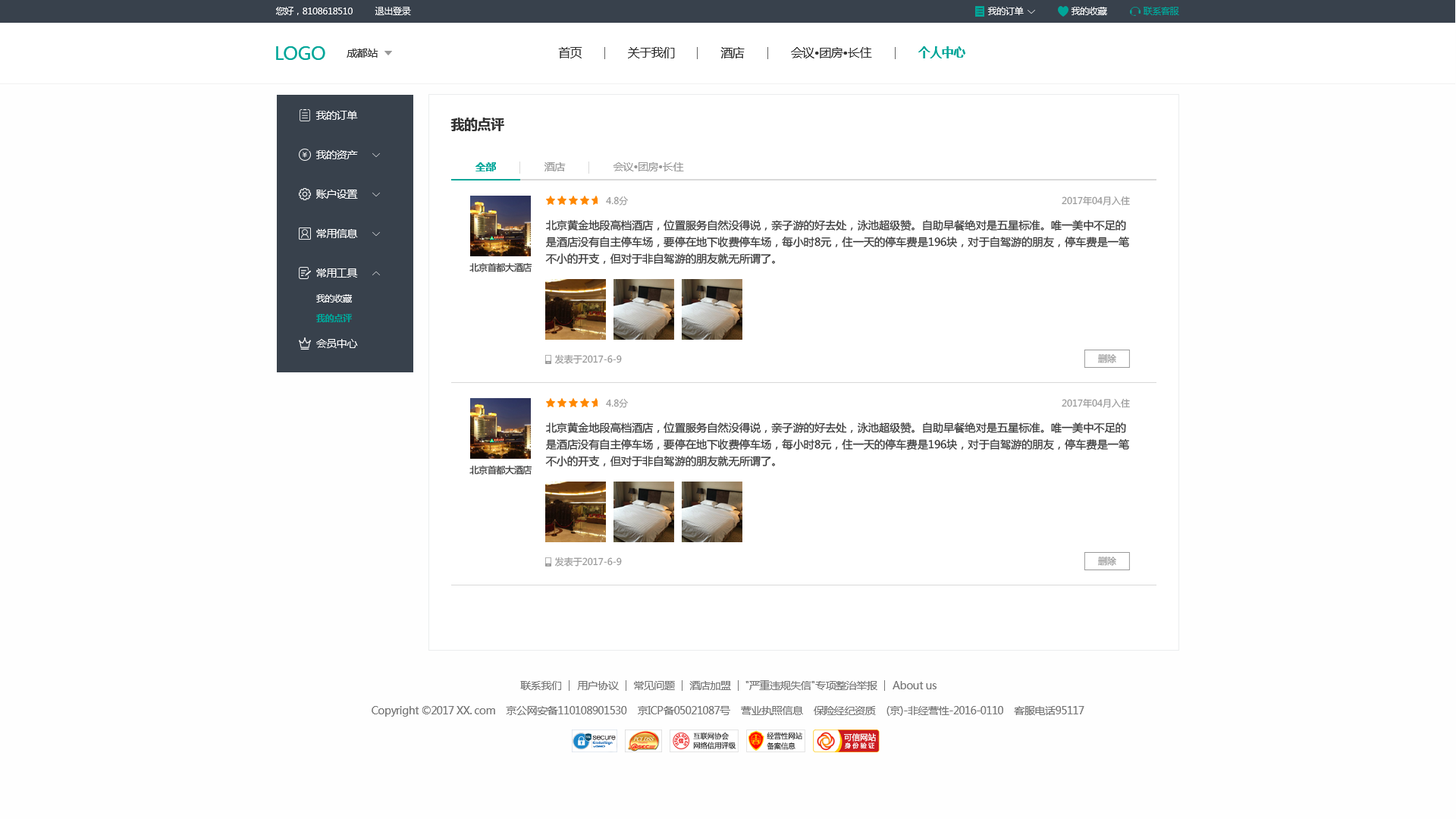
<style>
.page{position:relative;width:1456px;height:819px;background:#fefefe}
.page>*{position:absolute;margin:0}
.t1{font:9.1px "MicrosoftYaHei";letter-spacing:-0.03em;color:#ffffff}
.t2{font:9.1px "MicrosoftYaHei";letter-spacing:-0.03em;color:#00a699}
.t3{font:18.2px "MicrosoftYaHei";letter-spacing:-0.03em;color:#00a699}
.t4{font:10.6px "MicrosoftYaHei";letter-spacing:-0.03em;color:#333333}
.t5{font:12.1px "MicrosoftYaHei";letter-spacing:-0.03em;color:#333333}
.t6{font:12.1px "MicrosoftYaHei-Bold";letter-spacing:-0.03em;color:#00a699}
.t7{font:10.6px "MicrosoftYaHei";letter-spacing:-0.03em;color:#ffffff}
.t8{font:13.6px "MicrosoftYaHei-Bold";letter-spacing:-0.03em;color:#333333}
.t9{font:10.6px "MicrosoftYaHei-Bold";letter-spacing:-0.03em;color:#00a699}
.t10{font:10.6px "MicrosoftYaHei";letter-spacing:-0.03em;color:#999999}
.t11{font:9.1px "MicrosoftYaHei";color:#999999}
.t12{font:10.6px/16.7px "MicrosoftYaHei";color:#333333}
.t13{font:9.1px "MicrosoftYaHei";letter-spacing:-0.03em;color:#333333}
.t14{font:9.1px "MicrosoftYaHei-Bold";letter-spacing:-0.03em;color:#00a699}
.t15{font:10.6px "MicrosoftYaHei";letter-spacing:-0.03em;color:#777777}
</style>
<div class="page">
<p class="t1" style="left:276px;top:7px;width:77px;height:8px">您好，8108618510</p>
<p class="t1" style="left:375px;top:7px;width:36px;height:8px">退出登录</p>
<p class="t1" style="left:987px;top:7px;width:37px;height:8px">我的订单</p>
<p class="t1" style="left:1071px;top:7px;width:36px;height:8px">我的收藏</p>
<p class="t2" style="left:1144px;top:7px;width:35px;height:8px">联系客服</p>
<p class="t3" style="left:276px;top:46px;width:49px;height:14px">LOGO</p>
<p class="t4" style="left:347px;top:49px;width:31px;height:9px">成都站</p>
<p class="t5" style="left:558px;top:47px;width:24px;height:11px">首页</p>
<p class="t5" style="left:628px;top:47px;width:47px;height:11px">关于我们</p>
<p class="t5" style="left:720px;top:47px;width:25px;height:11px">酒店</p>
<p class="t5" style="left:791px;top:47px;width:81px;height:11px">会议•团房•长住</p>
<p class="t6" style="left:918px;top:46px;width:47px;height:12px">个人中心</p>
<p class="t7" style="left:315px;top:111px;width:43px;height:9px">我的订单</p>
<p class="t8" style="left:450px;top:118px;width:54px;height:13px">我的点评</p>
<p class="t7" style="left:315px;top:150px;width:43px;height:9px">我的资产</p>
<p class="t9" style="left:475px;top:162px;width:21px;height:9px">全部</p>
<p class="t10" style="left:544px;top:162px;width:22px;height:9px">酒店</p>
<p class="t10" style="left:613px;top:162px;width:71px;height:9px">会议•团房•长住</p>
<p class="t7" style="left:316px;top:190px;width:42px;height:9px">账户设置</p>
<p class="t11" style="left:606px;top:196px;width:23px;height:10px">4.8分</p>
<p class="t11" style="left:1062px;top:196px;width:68px;height:10px">2017年04月入住</p>
<p class="t12" style="left:545px;top:220px;width:584px;height:45px">北京黄金地段高档酒店，位置服务自然没得说，亲子游的好去处，泳池超级赞。自助早餐绝对是五星标准。唯一美中不足的是酒店没有自主停车场，要停在地下收费停车场，每小时8元，住一天的停车费是196块，对于自驾游的朋友，停车费是一笔不小的开支，但对于非自驾游的朋友就无所谓了。</p>
<p class="t7" style="left:316px;top:229px;width:42px;height:9px">常用信息</p>
<p class="t7" style="left:316px;top:268px;width:42px;height:10px">常用工具</p>
<p class="t13" style="left:469px;top:262px;width:63px;height:10px">北京首都大酒店</p>
<p class="t1" style="left:316px;top:294px;width:36px;height:9px">我的收藏</p>
<p class="t14" style="left:316px;top:314px;width:36px;height:8px">我的点评</p>
<p class="t7" style="left:316px;top:339px;width:42px;height:9px">会员中心</p>
<p class="t11" style="left:1098px;top:353px;width:18px;height:10px">删除</p>
<p class="t11" style="left:554px;top:354px;width:68px;height:10px">发表于2017-6-9</p>
<p class="t11" style="left:606px;top:398px;width:23px;height:10px">4.8分</p>
<p class="t11" style="left:1062px;top:398px;width:68px;height:10px">2017年04月入住</p>
<p class="t12" style="left:545px;top:422px;width:584px;height:45px">北京黄金地段高档酒店，位置服务自然没得说，亲子游的好去处，泳池超级赞。自助早餐绝对是五星标准。唯一美中不足的是酒店没有自主停车场，要停在地下收费停车场，每小时8元，住一天的停车费是196块，对于自驾游的朋友，停车费是一笔不小的开支，但对于非自驾游的朋友就无所谓了。</p>
<p class="t13" style="left:469px;top:465px;width:63px;height:10px">北京首都大酒店</p>
<p class="t11" style="left:554px;top:557px;width:68px;height:9px">发表于2017-6-9</p>
<p class="t11" style="left:1098px;top:556px;width:18px;height:10px">删除</p>
<p class="t15" style="left:520px;top:681px;width:41px;height:9px">联系我们</p>
<p class="t15" style="left:577px;top:681px;width:42px;height:9px">用户协议</p>
<p class="t15" style="left:634px;top:681px;width:41px;height:9px">常见问题</p>
<p class="t15" style="left:689px;top:681px;width:42px;height:9px">酒店加盟</p>
<p class="t15" style="left:745px;top:680px;width:132px;height:10px">"严重违规失信"专项整治举报</p>
<p class="t15" style="left:893px;top:681px;width:44px;height:8px">About us</p>
<p class="t15" style="left:372px;top:706px;width:712px;height:11px">Copyright ©2017 XX. com    京公网安备110108901530    京ICP备05021087号    营业执照信息    保险经纪资质    (京)-非经营性-2016-0110    客服电话95117</p>
</div>
